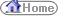
<style>
.page{position:relative;width:58px;height:16px;background:#ffffff}
.page>*{position:absolute;margin:0}
.t1{font:9px "MS Dialog";color:#999999}
</style>
<div class="page">
<p class="t1" style="left:23px;top:3px;width:31px;height:9px">Home</p>
</div>
